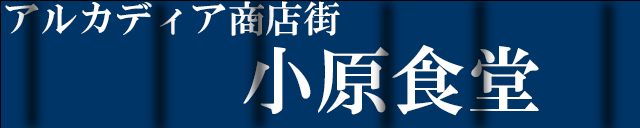
<style>
.page{position:relative;width:640px;height:128px;background:#003567}
.page>*{position:absolute;margin:0}
.t1{font:37.5px "HGSMinchoE";color:#ffffff}
.t2{font:75px "HGSMinchoE";color:#ffffff}
</style>
<div class="page">
<p class="t1" style="left:5px;top:1px;width:335px;height:35px">アルカディア商店街</p>
<p class="t2" style="left:243px;top:45px;width:296px;height:71px">小原食堂</p>
</div>
